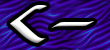
<style>
.page{position:relative;width:110px;height:50px}
.page>*{position:absolute;margin:0}
.t1{font:47.8px "DS_Mysticora";color:#ffffff;scale:2.44 1}
</style>
<div class="page">
<p class="t1" style="left:10px;top:5px;width:84px;height:38px">&lt;-</p>
</div>
